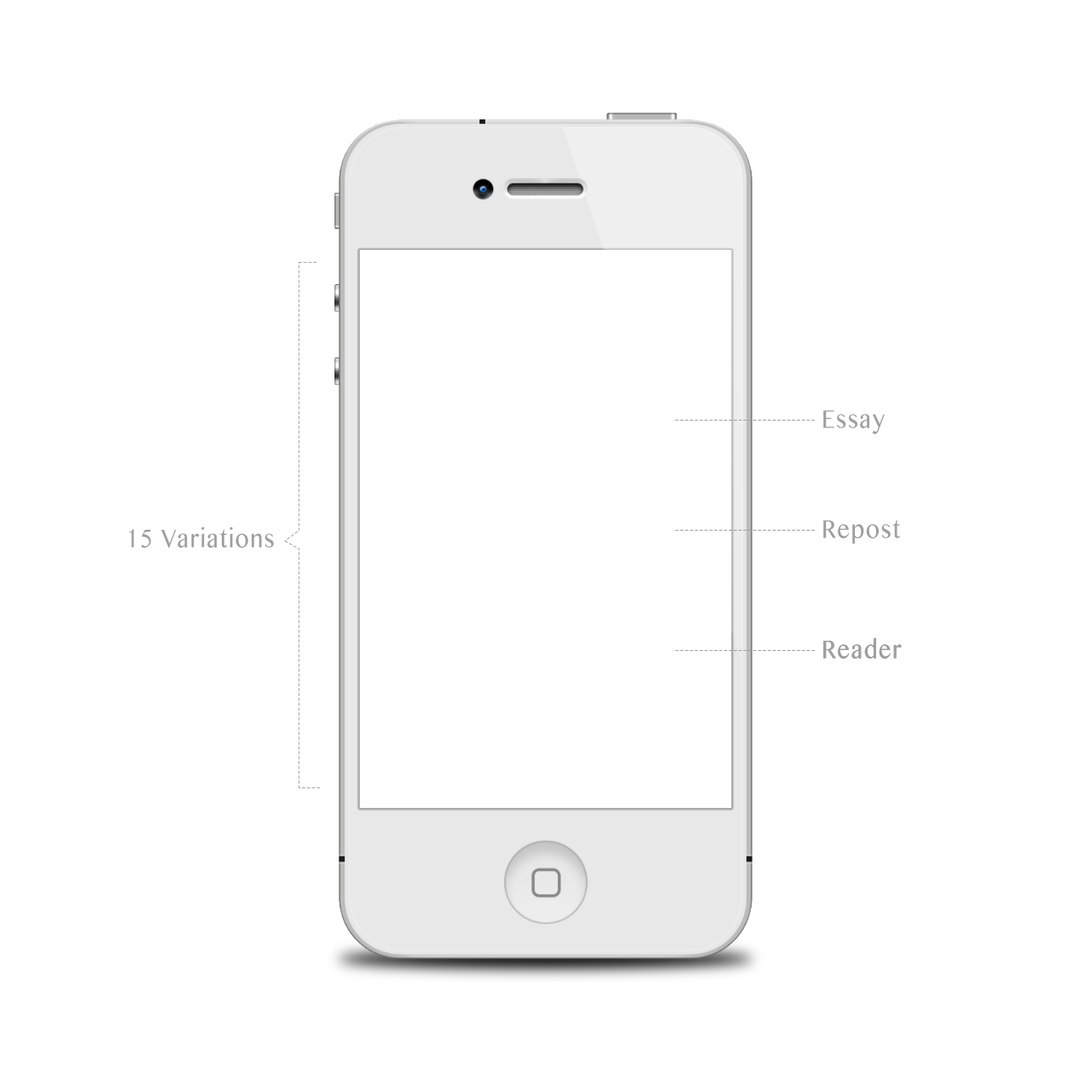
<style>
.page{position:relative;width:1092px;height:1092px;background:#ffffff}
.page>*{position:absolute;margin:0}
.t1{font:25.6px "BanglaMN";letter-spacing:0.06em;color:#9e9e9e;scale:0.86 1}
</style>
<div class="page">
<p class="t1" style="left:823px;top:410px;width:62px;height:24px">Essay</p>
<p class="t1" style="left:823px;top:520px;width:77px;height:24px">Repost</p>
<p class="t1" style="left:129px;top:526px;width:145px;height:22px">15 Variations</p>
<p class="t1" style="left:823px;top:637px;width:79px;height:22px">Reader</p>
<p class="t1" style="left:823px;top:637px;width:79px;height:22px">Reader</p>
</div>
